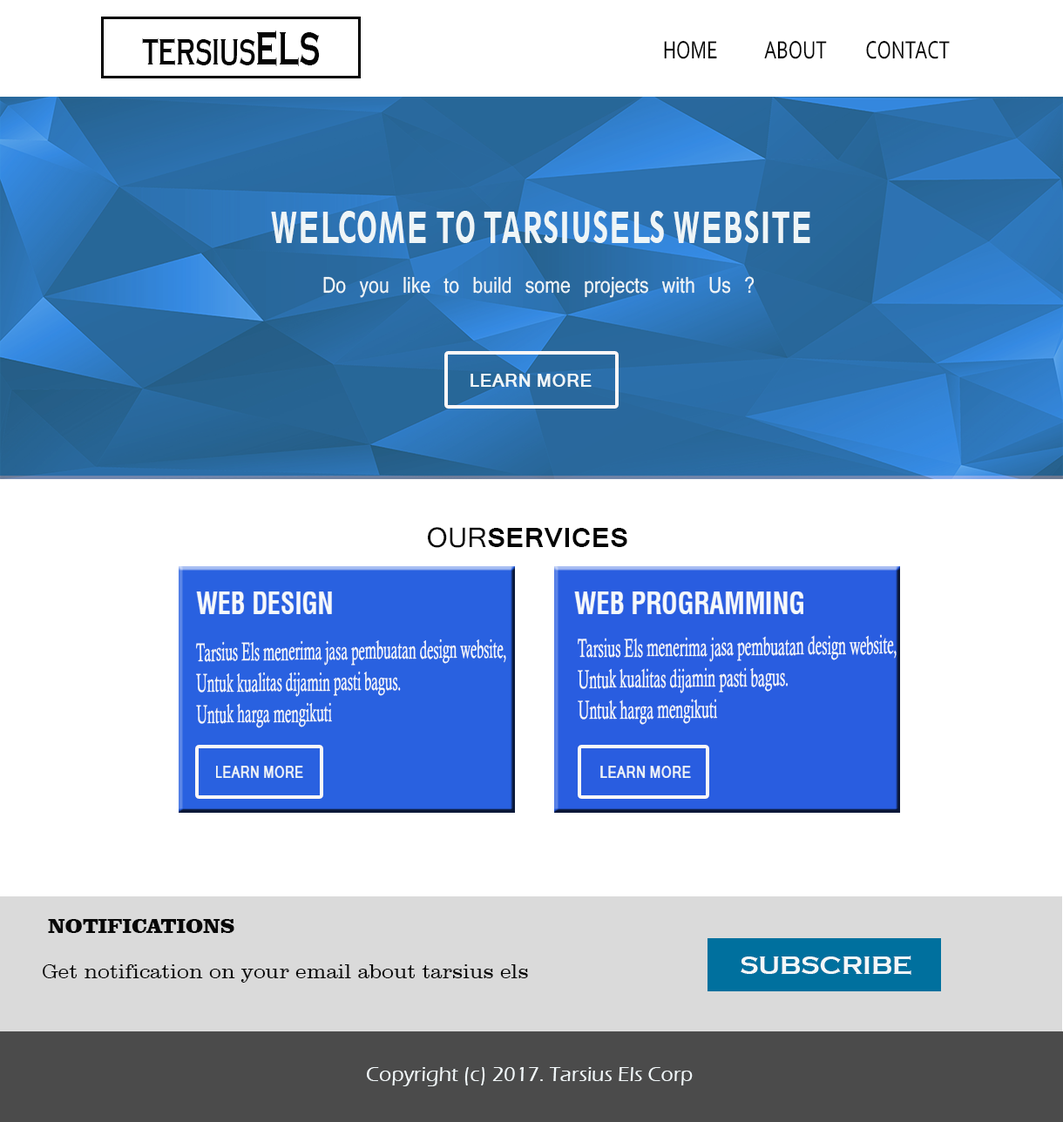
<style>
.page{position:relative;width:1063px;height:1122px;background:#ffffff}
.page>*{position:absolute;margin:0}
.t1{font:38.6px "CopperplateGothic-Bold";color:#040404;scale:0.61 1}
.t2{font:48.2px "CopperplateGothic-Bold";color:#040404;scale:0.61 1}
.t3{font:26.2px "Corbel";color:#030303;scale:0.75 1}
.t4{font:40.7px "Geometric212BT-HeavyCondensed";color:#eef5f7;scale:0.67 1}
.t5{font:21px "Kartika";color:#eef5f7;scale:0.85 1}
.t6{font:17.4px "Kartika-Bold";color:#eef5f7}
.t7{font:26.1px "Kartika-Bold";color:#030303}
.t8{font:26.1px "Kartika";color:#030303}
.t9{font:29.8px "Swiss721BT-BoldCondensed";color:#f5f9fb;scale:0.89 1}
.t10{font:29.8px "Swiss721BT-BoldCondensed";color:#f5f9fb;scale:0.91 1}
.t11{font:25.8px "CalistoMT";color:#f5f9fb;scale:0.53 1}
.t12{font:25.8px "CalistoMT";color:#f5f9fb;scale:0.55 1}
.t13{font:16.2px "Kartika-Bold";color:#eef5f7;scale:0.78 1}
.t14{font:16.2px "Kartika-Bold";color:#eef5f7;scale:0.8 1}
.t15{font:20.7px "ClarendonBT-Black";color:#080808}
.t16{font:20.9px "ClarendonBT-Light";color:#080808}
.t17{font:26.1px "CopperplateGothic-Bold";color:#f3f7f8}
.t18{font:20.9px "ErasITC-Medium";color:#f1f7f9}
</style>
<div class="page">
<p class="t1" style="left:142px;top:30px;width:178px;height:36px">TERSIUS<span class="t2">ELS</span></p>
<p class="t3" style="left:664px;top:40px;width:286px;height:19px">HOME            ABOUT          CONTACT</p>
<p class="t4" style="left:271px;top:211px;width:539px;height:32px">WELCOME TO TARSIUSELS WEBSITE</p>
<p class="t5" style="left:323px;top:276px;width:431px;height:22px">Do you like to build some projects with Us ?</p>
<p class="t6" style="left:470px;top:374px;width:121px;height:13px">LEARN MORE</p>
<p class="t7" style="left:428px;top:527px;width:199px;height:21px"><span class="t8">OUR</span>SERVICES</p>
<p class="t9" style="left:196px;top:591px;width:136px;height:23px">WEB DESIGN</p>
<p class="t10" style="left:574px;top:591px;width:229px;height:23px">WEB PROGRAMMING</p>
<p class="t11" style="left:196px;top:639px;width:310px;height:89px;rotate:-1deg">Tarsius Els menerima jasa pembuatan design website,<br>Untuk kualitas dijamin pasti bagus.<br>Untuk harga mengikuti</p>
<p class="t12" style="left:578px;top:634px;width:318px;height:91px;rotate:-1deg">Tarsius Els menerima jasa pembuatan design website,<br>Untuk kualitas dijamin pasti bagus.<br>Untuk harga mengikuti</p>
<p class="t13" style="left:216px;top:766px;width:87px;height:12px">LEARN MORE</p>
<p class="t14" style="left:600px;top:766px;width:91px;height:12px">LEARN MORE</p>
<p class="t15" style="left:48px;top:919px;width:186px;height:14px">NOTIFICATIONS</p>
<p class="t16" style="left:43px;top:964px;width:485px;height:19px">Get notification on your email about tarsius els</p>
<p class="t17" style="left:740px;top:956px;width:171px;height:19px">SUBSCRIBE</p>
<p class="t18" style="left:367px;top:1067px;width:326px;height:19px">Copyright (c) 2017. Tarsius Els Corp</p>
</div>
